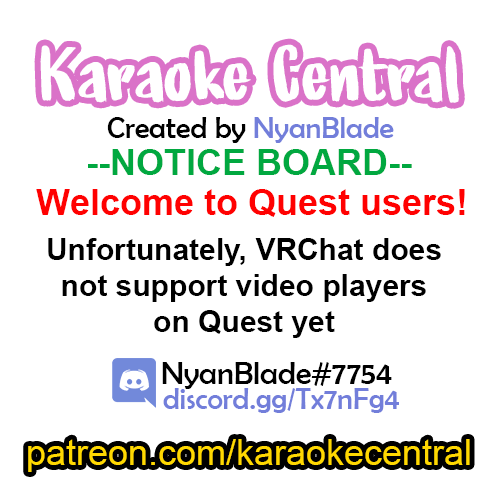
<style>
.page{position:relative;width:500px;height:500px;background:#ffffff}
.page>*{position:absolute;margin:0}
.t1{font:30px "BerlinSansFB-Reg";color:#000000}
.t2{font:30px "BerlinSansFB-Reg";color:#727eda}
.t3{font:36px "Arial-BoldMT";color:#01a840}
.t4{font:36px "Arial-BoldMT";color:#ff0101}
.t5{font:30px "Arial-BoldMT";color:#000000}
.t6{font:36px "ArialMT";color:#ffd801}
</style>
<div class="page">
<p class="t1" style="left:107px;top:117px;width:287px;height:26px">Created by <span class="t2">NyanBlade</span></p>
<p class="t3" style="left:88px;top:149px;width:324px;height:26px">--NOTICE BOARD--</p>
<p class="t4" style="left:36px;top:189px;width:429px;height:28px">Welcome to Quest users!</p>
<p class="t5" style="left:48px;top:238px;width:393px;height:100px;text-align:center">Unfortunately, VRChat does<br>not support video players<br>on Quest yet</p>
<p class="t2" style="left:163px;top:388px;width:236px;height:25px">discord.gg/Tx7nFg4</p>
<p class="t6" style="left:28px;top:439px;width:442px;height:33px">patreon.com/karaokecentral</p>
</div>
